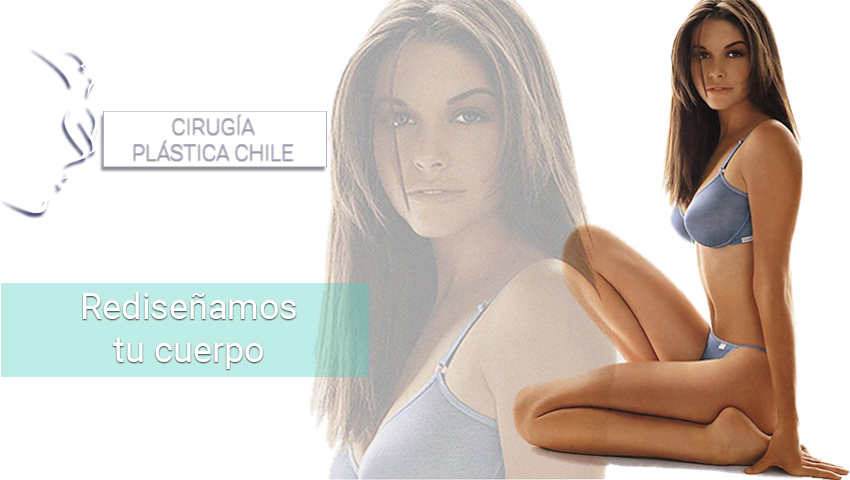
<style>
.page{position:relative;width:850px;height:480px;background:#ffffff}
.page>*{position:absolute;margin:0}
.t1{font:22px "Roboto-Thin";color:#b3afce}
.t2{font:36px "Roboto-Regular";color:#ffffff}
</style>
<div class="page">
<p class="t1" style="left:134px;top:114px;width:159px;height:46px;text-align:center">CIRUGÍA<br>PLÁSTICA CHILE</p>
<p class="t2" style="left:83px;top:292px;width:213px;height:77px;text-align:center">Rediseñamos<br>tu cuerpo</p>
</div>
